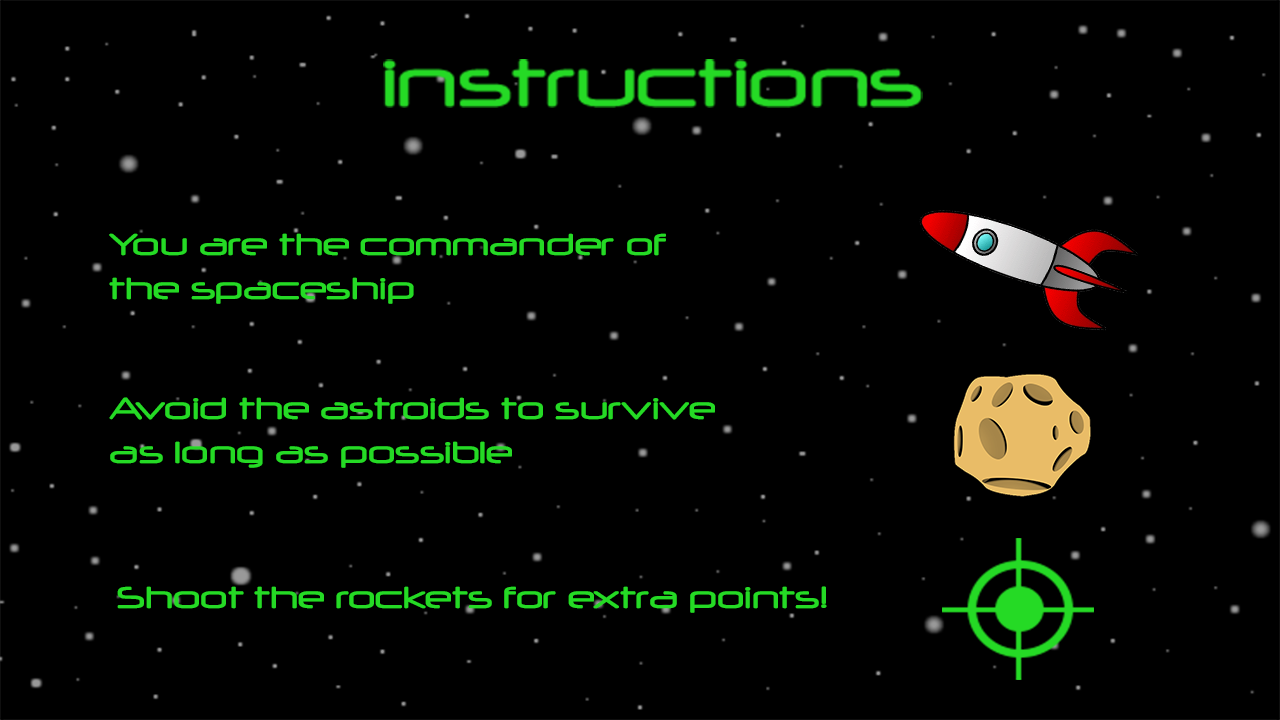
<style>
.page{position:relative;width:1280px;height:720px;background:#000000}
.page>*{position:absolute;margin:0}
.t1{font:36px/43.2px "Neuropol";color:#25da25;scale:1.08 1}
.t2{font:36px "Neuropol";color:#25da25;scale:1.08 1}
</style>
<div class="page">
<p class="t1" style="left:109px;top:233px;width:557px;height:71px">You are the commander of the spaceship</p>
<p class="t1" style="left:109px;top:397px;width:606px;height:71px">Avoid the astroids to survive as long as possible</p>
<p class="t2" style="left:117px;top:586px;width:710px;height:27px">Shoot the rockets for extra points!</p>
</div>
